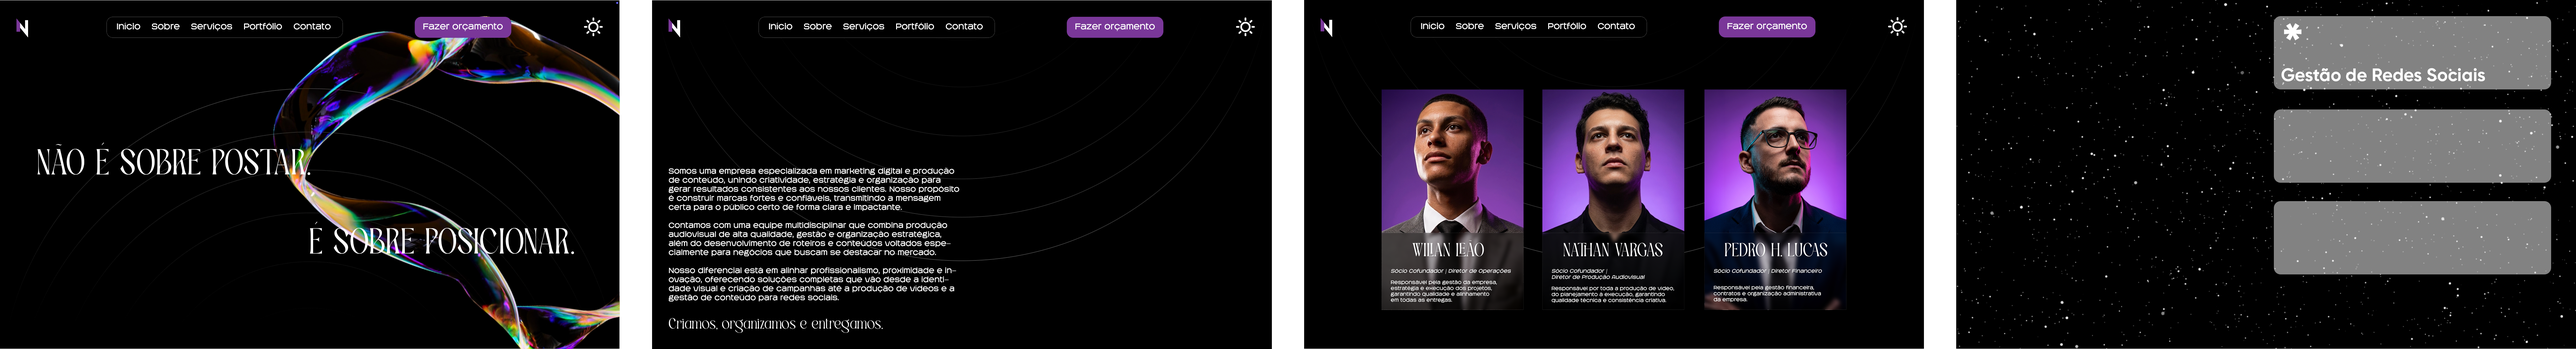
<style>
.page{position:relative;width:2576px;height:349px;background:#000000}
.page>*{position:absolute;margin:0}
.t1{font:8.4px "Kursk205W00-Light";color:#ffffff}
.t2{font:59.1px "Gilroy-Bold";color:#ffffff}
.t3{font:17.9px "Gilroy-Bold";color:#ffffff}
.t4{font:38.9px "TBJPalatino-Regular";color:#ffffff;text-transform:uppercase}
.t5{font:7.5px "Kursk205W00-Light";color:#ffffff}
.t6{font:16.1px "TBJPalatino-Regular";color:#ffffff}
</style>
<div class="page">
<p class="t1" style="left:117px;top:23px;width:214px;height:8px">Início    Sobre    Serviços    Portfólio    Contato</p>
<p class="t1" style="left:423px;top:23px;width:80px;height:8px">Fazer orçamento</p>
<p class="t1" style="left:769px;top:23px;width:214px;height:8px">Início    Sobre    Serviços    Portfólio    Contato</p>
<p class="t1" style="left:1075px;top:23px;width:80px;height:8px">Fazer orçamento</p>
<p class="t1" style="left:1421px;top:22px;width:214px;height:9px">Início    Sobre    Serviços    Portfólio    Contato</p>
<p class="t1" style="left:1727px;top:23px;width:80px;height:8px">Fazer orçamento</p>
<p class="t2" style="left:2284px;top:23px;width:18px;height:17px">*</p>
<p class="t3" style="left:2281px;top:68px;width:204px;height:13px">Gestão de Redes Sociais</p>
<p class="t4" style="left:37px;top:143px;width:273px;height:32px">Não é sobre postar.</p>
<p class="t5" style="left:669px;top:168px;width:290px;height:165px">Somos uma empresa especializada em marketing digital e produção de conteúdo, unindo criatividade, estratégia e organização para gerar resultados consistentes aos nossos clientes. Nosso propósito é construir marcas fortes e confiáveis, transmitindo a mensagem certa para o público certo de forma clara e impactante.<br><br>Contamos com uma equipe multidisciplinar que combina produção audiovisual de alta qualidade, gestão e organização estratégica, além do desenvolvimento de roteiros e conteúdos voltados especialmente para negócios que buscam se destacar no mercado.<br><br>Nosso diferencial está em alinhar profissionalismo, proximidade e inovação, oferecendo soluções completas que vão desde a identidade visual e criação de campanhas até a produção de vídeos e a gestão de conteúdo para redes sociais.<br><br><span class="t6">Criamos, organizamos e entregamos.</span></p>
<p class="t4" style="left:310px;top:222px;width:264px;height:32px">É sobre posicionar.</p>
</div>
